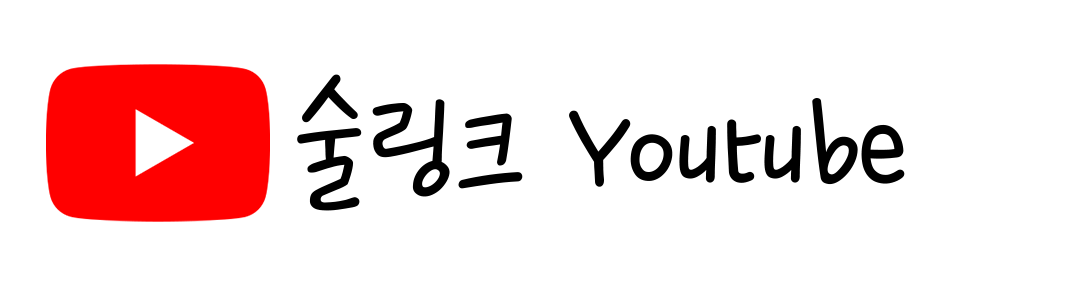
<style>
.page{position:relative;width:1080px;height:300px;background:#ffffff}
.page>*{position:absolute;margin:0}
.t1{font:165px "GangwonEduHyeonokTMedium";letter-spacing:-0.05em;color:#000000}
</style>
<div class="page">
<p class="t1" style="left:297px;top:74px;width:608px;height:137px">술링크 Youtube</p>
</div>
